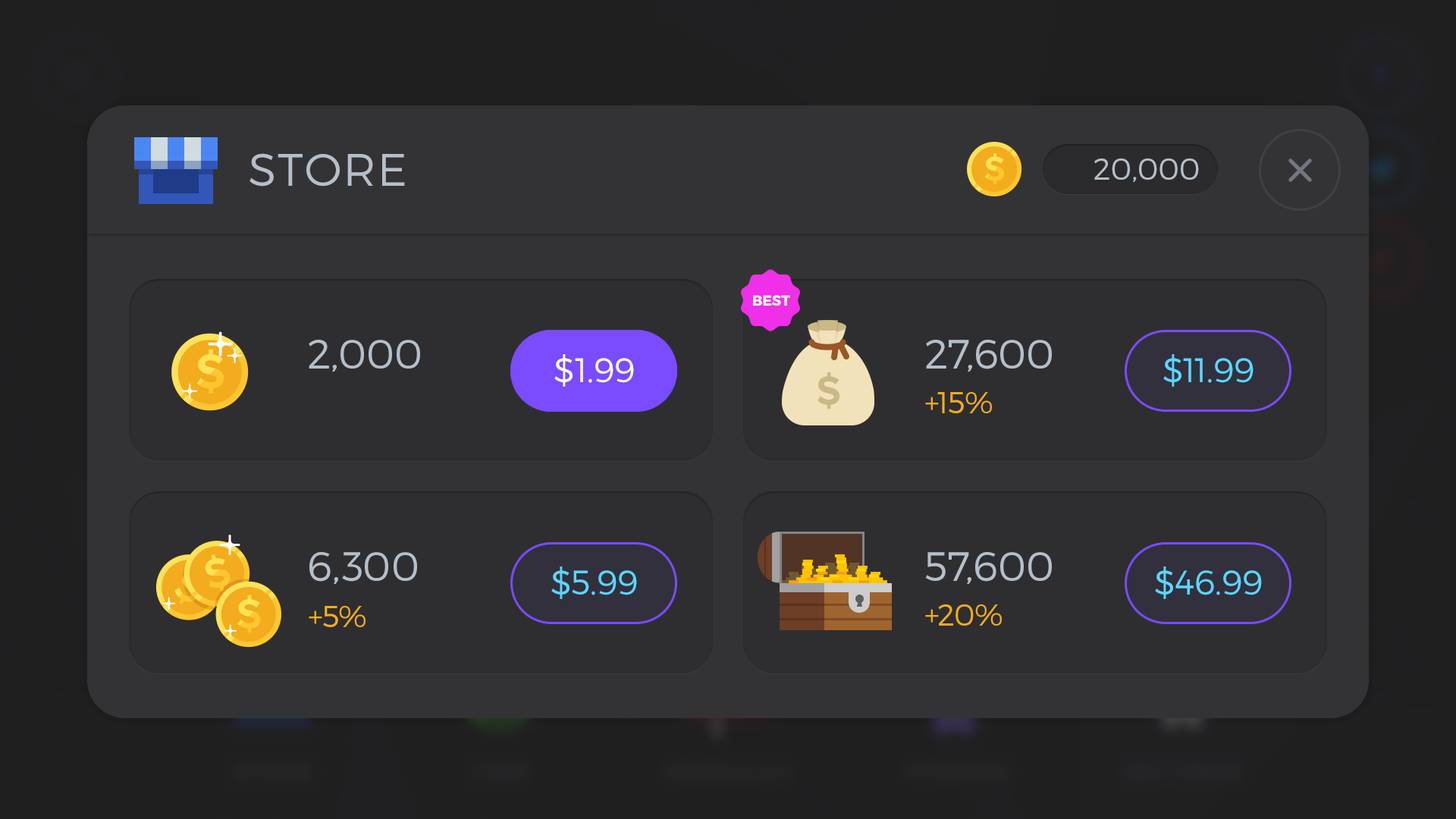
<style>
.page{position:relative;width:1456px;height:819px;background:#333336}
.page>*{position:absolute;margin:0}
.t1{font:45.5px "Montserrat-Light";letter-spacing:0.03em;color:#b6bfc9;text-transform:uppercase}
.t2{font:30.3px "Montserrat-Light";color:#b6bfc9;text-transform:uppercase}
.t3{font:14.4px "Montserrat-Bold";color:#ffffff}
.t4{font:40.9px/212.3px "Montserrat-Light";color:#b6bfc9}
.t5{font:34.1px/212.3px "Montserrat-Light"}
.t6{font:34.1px "Montserrat-Light";color:#ffffff}
.t7{font:34.1px/212.3px "Montserrat-Light";color:#5bd6ff}
.t8{font:30.3px/212.3px "Montserrat-Light";color:#f2ac1e}
.t9{font:30.3px "Montserrat-Light";color:#f2ac1e}
</style>
<div class="page">
<p class="t1" style="left:249px;top:153px;width:156px;height:34px">store</p>
<p class="t2" style="left:1094px;top:158px;width:105px;height:24px">20,000</p>
<p class="t3" style="left:753px;top:295px;width:37px;height:11px">BEST</p>
<p class="t4" style="left:309px;top:340px;width:111px;height:244px">2,000<br>6,300</p>
<p class="t4" style="left:925px;top:340px;width:127px;height:244px">27,600<br>57,600</p>
<p class="t5" style="left:551px;top:354px;width:86px;height:245px;text-align:center">$1.99<br>$5.99</p>
<p class="t6" style="left:554px;top:354px;width:80px;height:33px">$1.99</p>
<p class="t7" style="left:1155px;top:354px;width:107px;height:245px;text-align:center">$11.99<br>$46.99</p>
<p class="t8" style="left:925px;top:392px;width:77px;height:234px">+15%<br>+20%</p>
<p class="t9" style="left:309px;top:606px;width:57px;height:21px">+5%</p>
</div>
